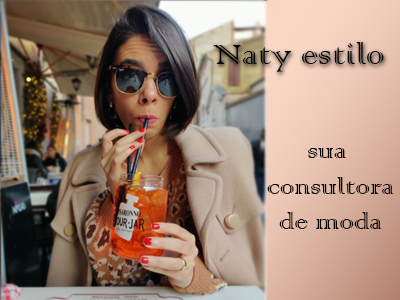
<style>
.page{position:relative;width:400px;height:300px}
.page>*{position:absolute;margin:0}
.t1{font:37.2px "ColonnaMT";color:#000000}
.t2{font:29.4px "ColonnaMT";color:#000000}
</style>
<div class="page">
<p class="t1" style="left:213px;top:42px;width:171px;height:30px">Naty estilo</p>
<p class="t2" style="left:267px;top:148px;width:127px;height:81px;text-align:center">sua <br>consultora<br>de moda</p>
</div>
